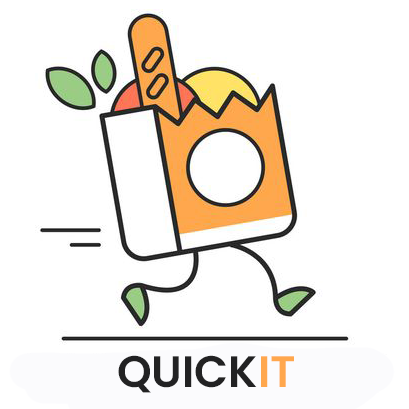
<style>
.page{position:relative;width:409px;height:409px;background:#ffffff}
.page>*{position:absolute;margin:0}
.t1{font:44.2px "Poppins-SemiBold";color:#222223}
.t2{font:44.2px "Poppins-SemiBold";color:#ffa74d}
</style>
<div class="page">
<p class="t1" style="left:118px;top:355px;width:176px;height:38px">QUICK<span class="t2">IT</span></p>
</div>
